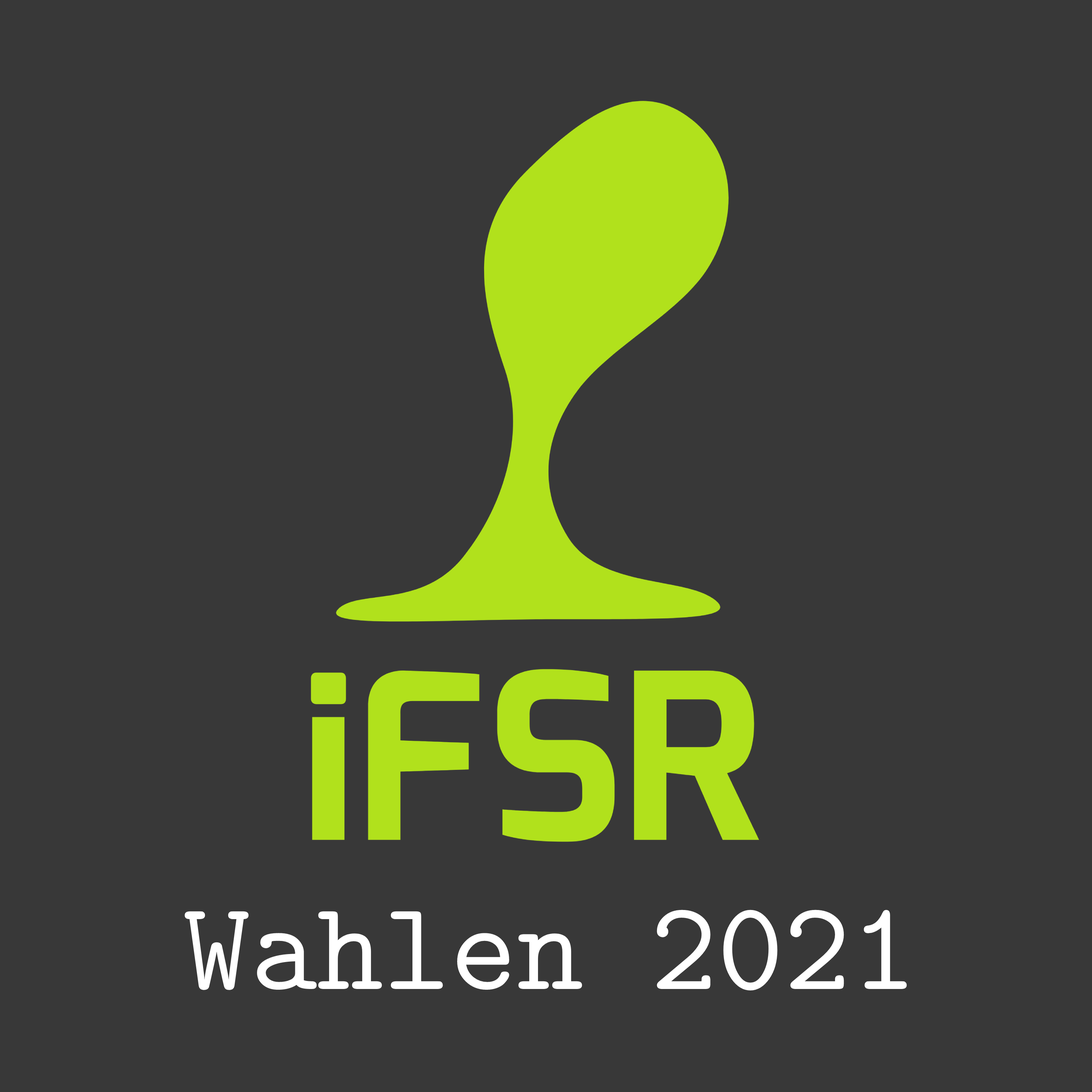
<style>
.page{position:relative;width:1092px;height:1092px;background:#383838}
.page>*{position:absolute;margin:0}
.t1{font:127.1px "CMUTypewriter-Regular";color:#ffffff}
</style>
<div class="page">
<p class="t1" style="left:185px;top:910px;width:722px;height:80px">Wahlen 2021</p>
</div>
